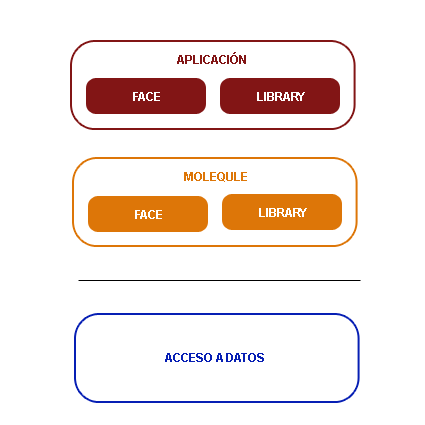
<style>
.page{position:relative;width:425px;height:425px;background:#ffffff}
.page>*{position:absolute;margin:0}
.t1{font:12px "Arial-BoldMT";color:#821515}
.t2{font:12px "Arial-BoldMT";color:#ffffff}
.t3{font:12px "Arial-BoldMT";color:#dd7608}
.t4{font:12px "Arial-BoldMT";color:#071fb4}
</style>
<div class="page">
<p class="t1" style="left:177px;top:52px;width:69px;height:12px">APLICACIÓN</p>
<p class="t2" style="left:133px;top:92px;width:27px;height:9px">FACE</p>
<p class="t2" style="left:257px;top:92px;width:48px;height:9px">LIBRARY</p>
<p class="t3" style="left:184px;top:172px;width:63px;height:10px">MOLEQULE</p>
<p class="t2" style="left:259px;top:208px;width:48px;height:9px">LIBRARY</p>
<p class="t2" style="left:135px;top:210px;width:27px;height:9px">FACE</p>
<p class="t4" style="left:165px;top:353px;width:99px;height:9px">ACCESO A DATOS</p>
</div>
